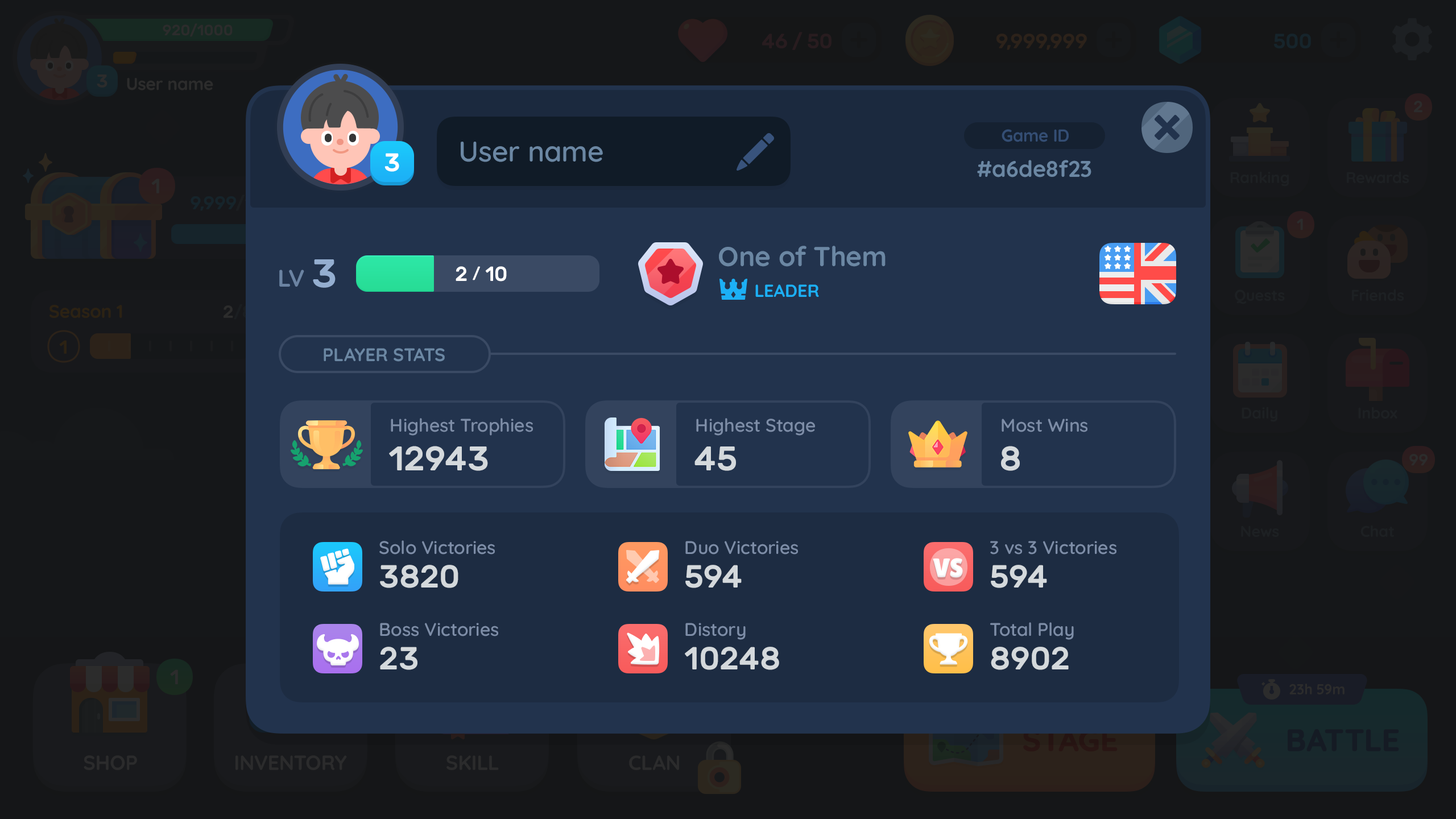
<style>
.page{position:relative;width:1456px;height:819px;background:#22334d}
.page>*{position:absolute;margin:0}
.t1{font:17.1px "Quicksand-Bold";color:#344e74}
.t2{font:28.4px "Quicksand-SemiBold";color:#6b87a3}
.t3{font:25.4px "Rubik-Medium";color:#ffffff}
.t4{font:22.7px "Quicksand-Bold";color:#6b87a3}
.t5{font:27.3px "Quicksand-Bold";color:#6b87a3}
.t6{font:23.9px "Quicksand-Bold";color:#6b83a2}
.t7{font:39.8px "Rubik-Medium";color:#94aed0}
.t8{font:20.5px "Rubik-Medium";color:#ffffff;text-transform:uppercase}
.t9{font:15.4px "Rubik-Medium";color:#ffffff;text-transform:uppercase}
.t10{font:17.4px "Quicksand-Bold";color:#1cb0f6;text-transform:uppercase}
.t11{font:18.2px "Quicksand-Bold";color:#6b87a3;text-transform:uppercase}
.t12{font:18.2px "Quicksand-SemiBold";color:#7d8da7}
.t13{font:34.1px "Rubik-Medium";color:#d4d9dc;text-transform:uppercase}
.t14{font:31.8px "Rubik-Medium";color:#d4d9dc;text-transform:uppercase}
</style>
<div class="page">
<p class="t1" style="left:1002px;top:129px;width:67px;height:13px">Game ID</p>
<p class="t2" style="left:461px;top:142px;width:142px;height:20px">User name</p>
<p class="t3" style="left:384px;top:153px;width:15px;height:19px">3</p>
<p class="t4" style="left:977px;top:160px;width:114px;height:17px">#a6de8f23</p>
<p class="t5" style="left:719px;top:246px;width:167px;height:21px">One of Them</p>
<p class="t6" style="left:279px;top:270px;width:25px;height:17px">LV</p>
<p class="t7" style="left:313px;top:259px;width:23px;height:29px">3</p>
<p class="t8" style="left:456px;top:266px;width:51px;height:16px">2 <span class="t9">/</span> 10</p>
<p class="t10" style="left:755px;top:284px;width:64px;height:13px">Leader</p>
<p class="t11" style="left:324px;top:348px;width:121px;height:14px">Player Stats</p>
<p class="t12" style="left:391px;top:418px;width:142px;height:18px">Highest Trophies</p>
<p class="t12" style="left:696px;top:418px;width:119px;height:18px">Highest Stage</p>
<p class="t12" style="left:1002px;top:419px;width:85px;height:13px">Most Wins</p>
<p class="t13" style="left:389px;top:446px;width:99px;height:25px">12943</p>
<p class="t13" style="left:694px;top:446px;width:42px;height:25px">45</p>
<p class="t13" style="left:1001px;top:446px;width:19px;height:25px">8</p>
<p class="t12" style="left:379px;top:540px;width:116px;height:15px">Solo Victories</p>
<p class="t12" style="left:685px;top:541px;width:113px;height:14px">Duo Victories</p>
<p class="t12" style="left:990px;top:541px;width:126px;height:14px">3 vs 3 Victories</p>
<p class="t14" style="left:380px;top:565px;width:78px;height:23px">3820</p>
<p class="t14" style="left:685px;top:565px;width:57px;height:23px">594</p>
<p class="t14" style="left:991px;top:565px;width:56px;height:23px">594</p>
<p class="t12" style="left:380px;top:623px;width:118px;height:13px">Boss Victories</p>
<p class="t12" style="left:685px;top:623px;width:61px;height:17px">Distory</p>
<p class="t12" style="left:990px;top:622px;width:84px;height:18px">Total Play</p>
<p class="t14" style="left:380px;top:647px;width:37px;height:23px">23</p>
<p class="t14" style="left:685px;top:647px;width:94px;height:23px">10248</p>
<p class="t14" style="left:991px;top:647px;width:78px;height:23px">8902</p>
</div>
